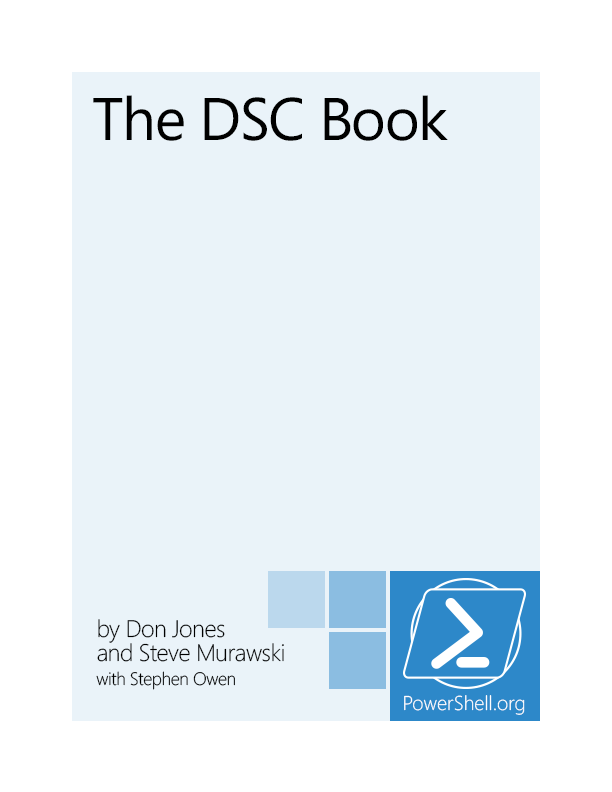
<style>
.page{position:relative;width:612px;height:792px;background:#eaf3f9}
.page>*{position:absolute;margin:0}
.t1{font:60px "Segoe";letter-spacing:-0.025em;color:#000000}
.t2{font:24px/24px "Segoe-Light";letter-spacing:-0.025em;color:#000000}
.t3{font:18px/24px "Segoe-Light";letter-spacing:-0.025em;color:#000000}
</style>
<div class="page">
<p class="t1" style="left:93px;top:95px;width:355px;height:46px">The DSC Book</p>
<p class="t2" style="left:96px;top:619px;width:188px;height:71px">by Don Jones<br>and Steve Murawski<br><span class="t3">with Stephen Owen</span></p>
</div>
